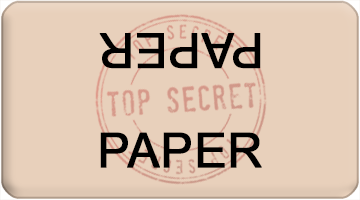
<style>
.page{position:relative;width:360px;height:200px;background:#e8d0bb}
.page>*{position:absolute;margin:0}
.t1{font:48px "ArialMT";color:#000000;font-weight:bold}
</style>
<div class="page">
<p class="t1" style="left:99px;top:33px;width:162px;height:36px;rotate:180deg">PAPER</p>
<p class="t1" style="left:100px;top:132px;width:162px;height:36px">PAPER</p>
</div>
